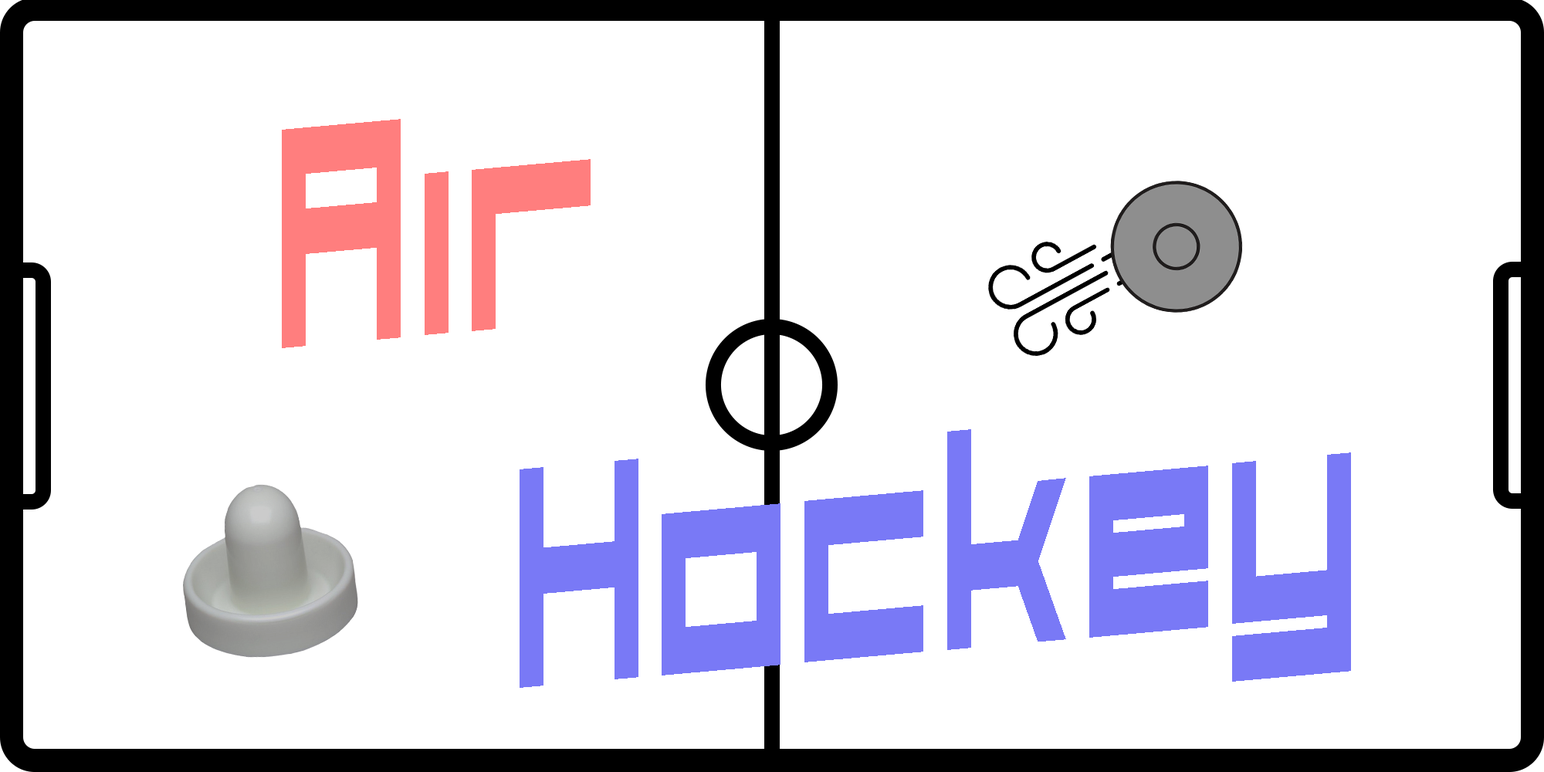
<style>
.page{position:relative;width:1544px;height:772px;background:#ffffff}
.page>*{position:absolute;margin:0}
.t1{font:287.5px/361.4px "Aerial";color:#7979f6;scale:0.52 1}
.t2{font:287.5px/361.4px "Aerial";color:#ff7e7e;scale:0.52 1}
</style>
<div class="page">
<p class="t1" style="left:282px;top:119px;width:1069px;height:569px;text-align:center;rotate:-5deg"><span class="t2">Air<br>       </span>Hockey</p>
</div>
